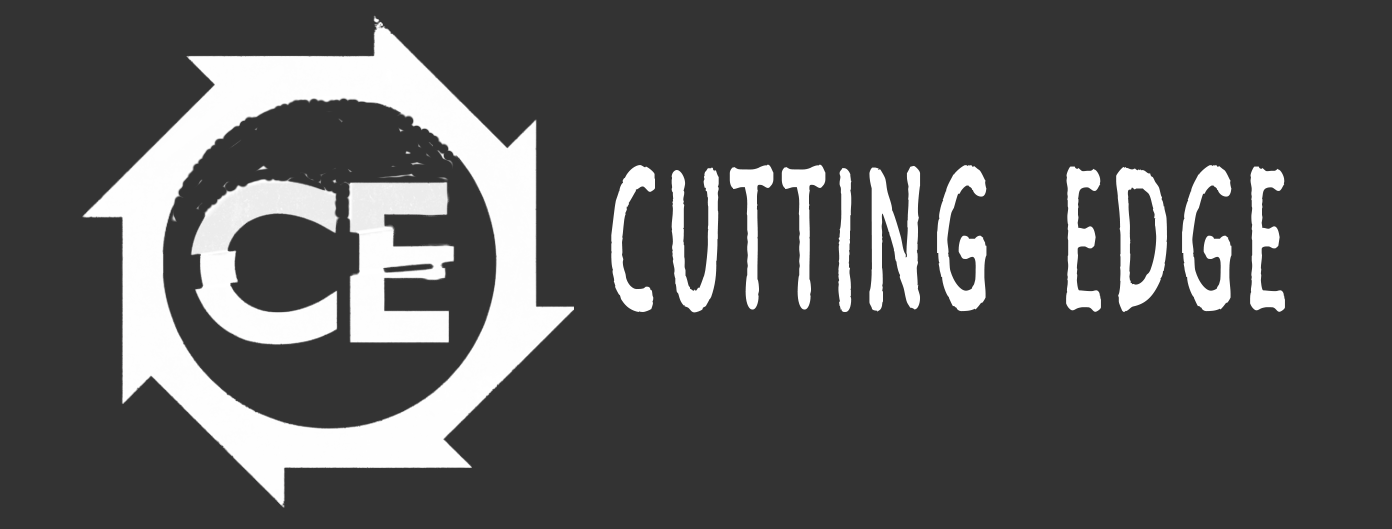
<style>
.page{position:relative;width:1392px;height:529px;background:#333333}
.page>*{position:absolute;margin:0}
.t1{font:201.6px "SegoeMarker";letter-spacing:0.05em;color:#ffffff;scale:0.54 1}
.t2{font:108px "SegoeMarker";color:#262626}
</style>
<div class="page">
<p class="t1" style="left:611px;top:164px;width:674px;height:149px"><span class="t2"><br><br> </span>CUTTING  EDGE</p>
</div>
